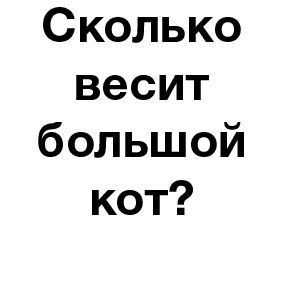
<style>
.page{position:relative;width:283px;height:283px;background:#ffffff}
.page>*{position:absolute;margin:0}
.t1{font:48px "HelveticaNeueCyr-Bold";color:#000000}
</style>
<div class="page">
<p class="t1" style="left:38px;top:7px;width:206px;height:208px;text-align:center">Сколько весит большой кот?</p>
</div>
